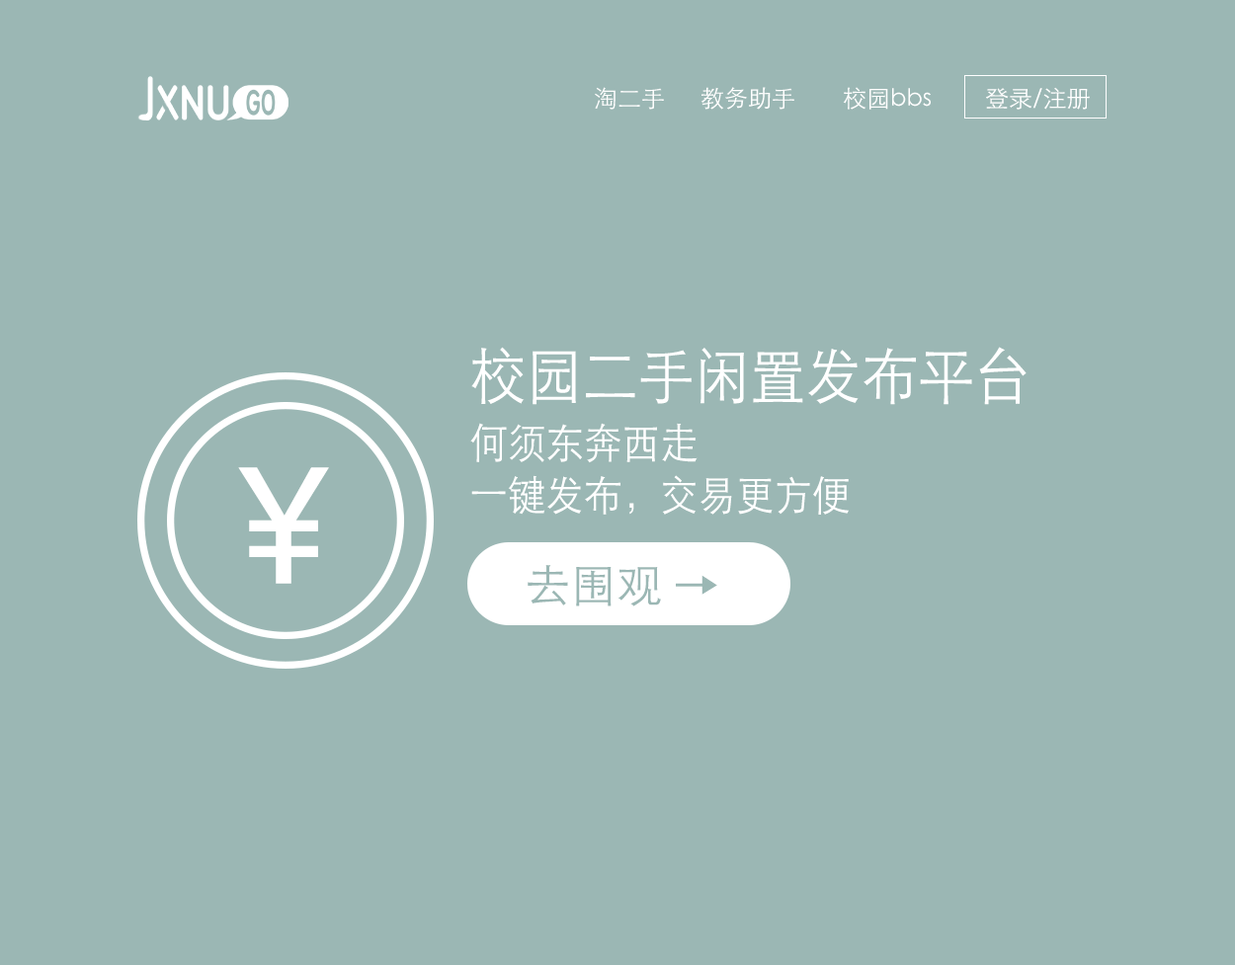
<style>
.page{position:relative;width:1235px;height:965px;background:#9bb7b4}
.page>*{position:absolute;margin:0}
.t1{font:23.7px "STXihei";color:#ffffff}
.t2{font:41.8px "STXihei";color:#ffffff;scale:0.91 1}
.t3{font:61.6px "STXihei";color:#ffffff;scale:0.91 1}
.t4{font:163.7px "AvenirNext-Medium";color:#ffffff;scale:0.97 1}
.t5{font:45.7px "STXihei";color:#9bb7b4}
</style>
<div class="page">
<p class="t1" style="left:595px;top:87px;width:495px;height:23px">淘二手 教务助手   校园bbs  登录/注册</p>
<p class="t2" style="left:470px;top:347px;width:557px;height:168px"><span class="t3">校园二手闲置发布平台</span><br>何须东奔西走<br>一键发布，交易更方便</p>
<p class="t4" style="left:238px;top:467px;width:91px;height:117px">¥</p>
<p class="t5" style="left:528px;top:565px;width:189px;height:42px">去围观 →</p>
</div>
